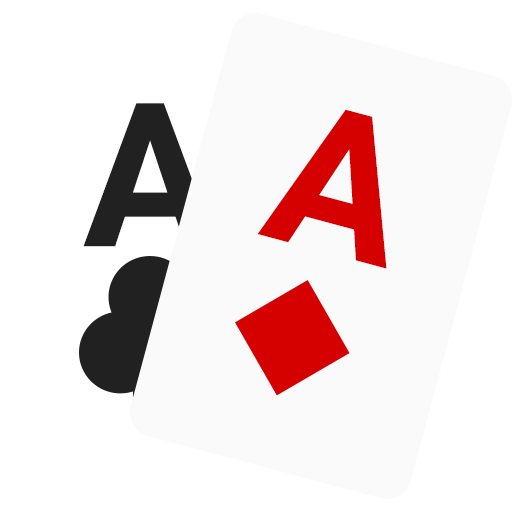
<style>
.page{position:relative;width:512px;height:512px;background:#ffffff}
.page>*{position:absolute;margin:0}
.t1{font:200.1px "Roboto-Bold";letter-spacing:-0.06em;color:#212121;font-weight:bold}
.t2{font:200.1px "Roboto-Bold";letter-spacing:-0.06em;color:#d50000;font-weight:bold}
</style>
<div class="page">
<p class="t1" style="left:83px;top:103px;width:134px;height:144px">A</p>
<p class="t2" style="left:257px;top:109px;width:130px;height:160px;rotate:15deg">A</p>
</div>
